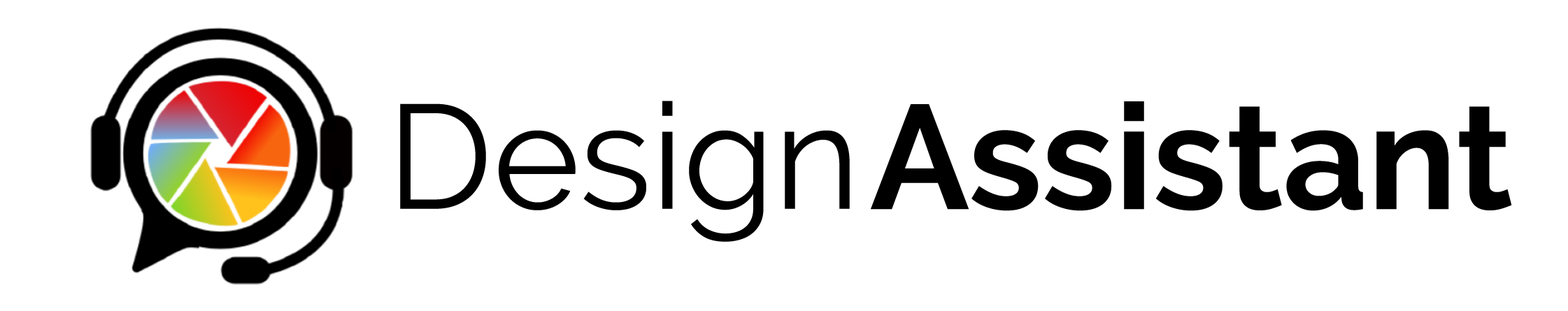
<style>
.page{position:relative;width:1568px;height:311px;background:#ffffff}
.page>*{position:absolute;margin:0}
.t1{font:147.6px "Raleway";color:#000000}
.t2{font:147.6px "Raleway-Bold";color:#000000}
</style>
<div class="page">
<p class="t1" style="left:400px;top:101px;width:450px;height:141px">Design</p>
<p class="t2" style="left:871px;top:101px;width:641px;height:110px">Assistant</p>
</div>
